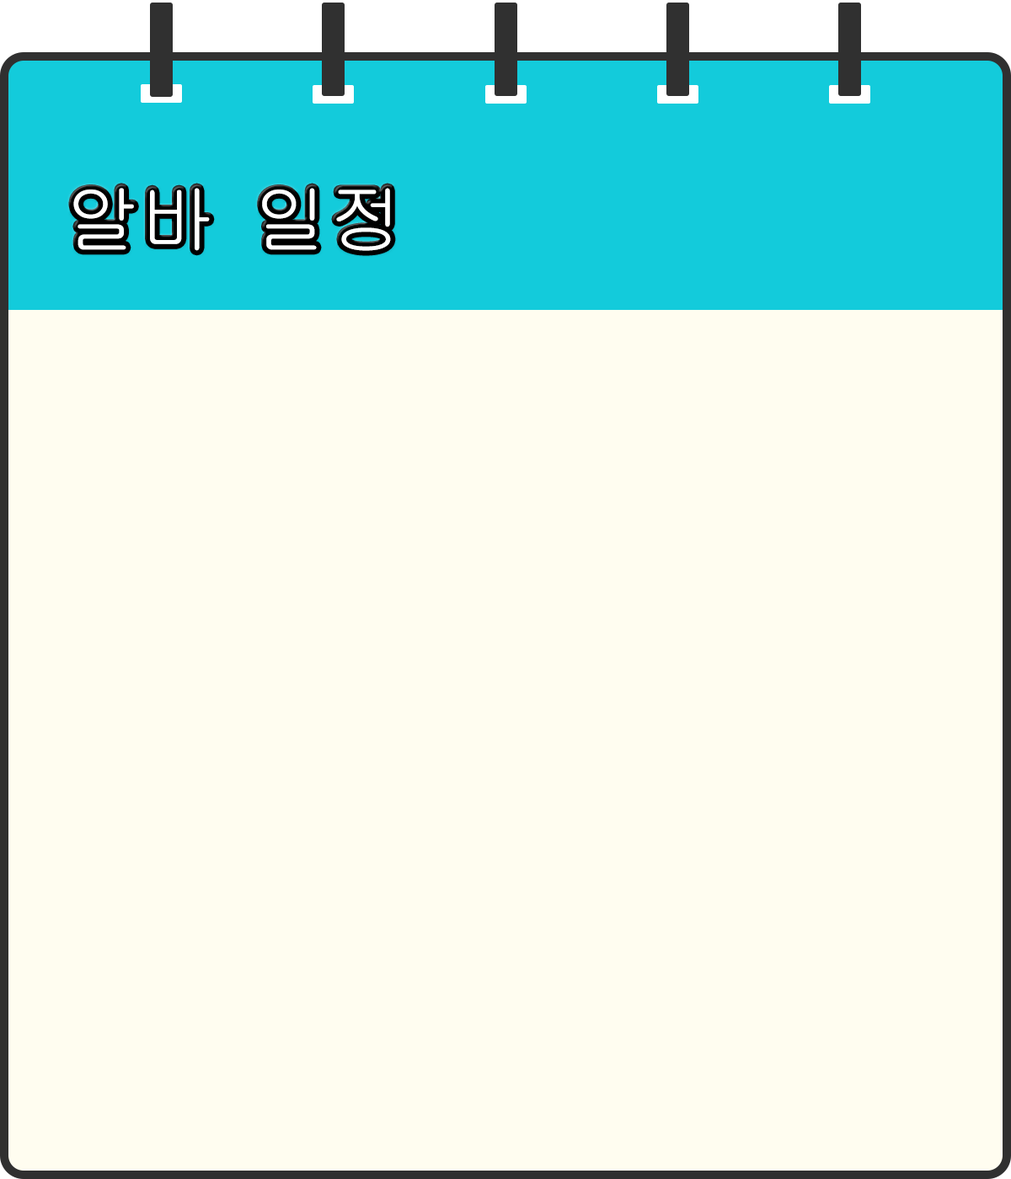
<style>
.page{position:relative;width:1011px;height:1179px;background:#fffdf0}
.page>*{position:absolute;margin:0}
.t1{font:75.8px "GulimChe";color:#ffffff}
</style>
<div class="page">
<p class="t1" style="left:73px;top:188px;width:318px;height:63px">알바 일정</p>
</div>
